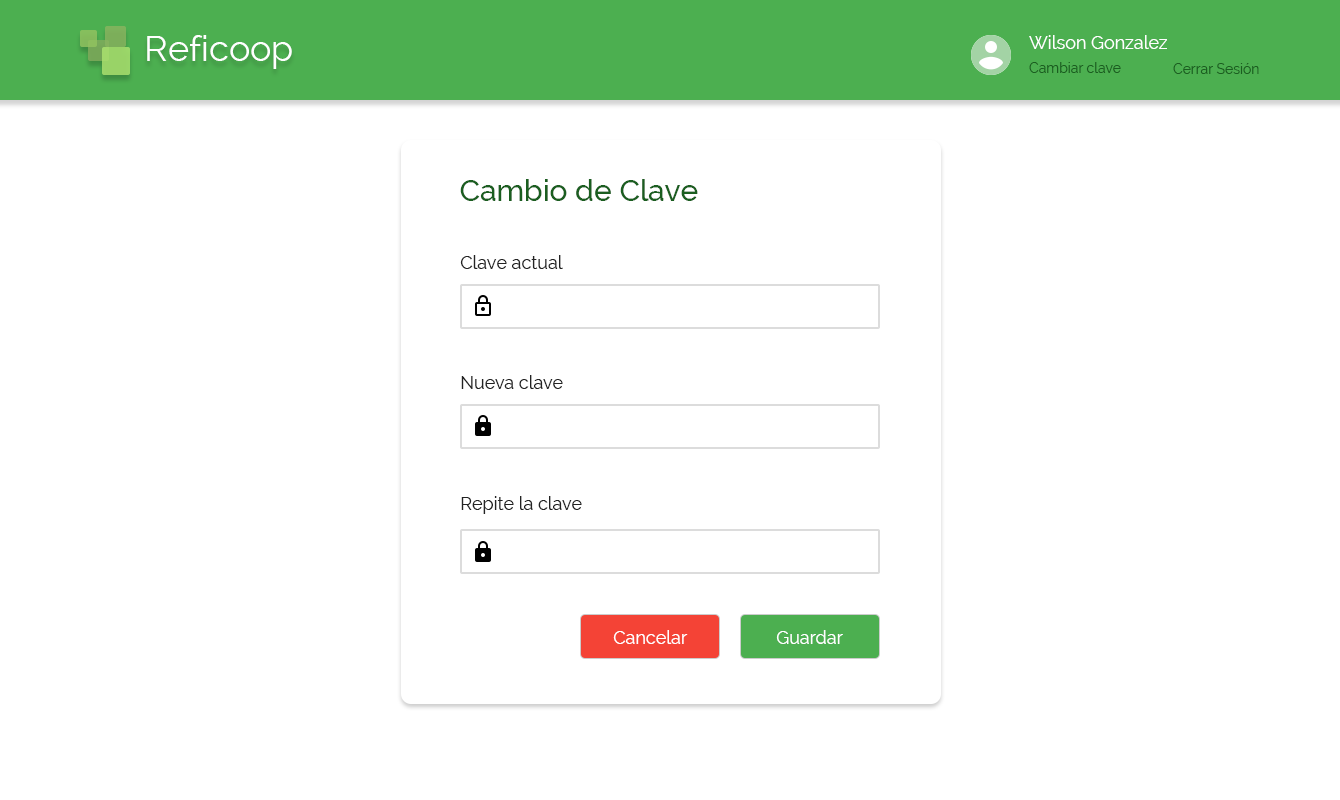
<style>
.page{position:relative;width:1340px;height:800px;background:#ffffff}
.page>*{position:absolute;margin:0}
.t1{font:36px "Raleway";color:#ffffff}
.t2{font:18px "Raleway";color:#ffffff}
.t3{font:14px "Raleway";color:#1b5e20}
.t4{font:30px "Raleway-Medium";color:#1b5e20}
.t5{font:18px "Raleway";color:#232323}
</style>
<div class="page">
<p class="t1" style="left:147px;top:35px;width:145px;height:34px">Reficoop</p>
<p class="t2" style="left:1029px;top:35px;width:138px;height:14px">Wilson Gonzalez</p>
<p class="t3" style="left:1029px;top:62px;width:92px;height:11px">Cambiar clave</p>
<p class="t3" style="left:1173px;top:63px;width:86px;height:11px">Cerrar Sesión</p>
<p class="t4" style="left:460px;top:179px;width:238px;height:22px">Cambio de Clave</p>
<p class="t5" style="left:460px;top:255px;width:103px;height:14px">Clave actual</p>
<p class="t5" style="left:461px;top:375px;width:102px;height:14px">Nueva clave</p>
<p class="t5" style="left:461px;top:496px;width:121px;height:18px">Repite la clave</p>
<p class="t2" style="left:613px;top:630px;width:75px;height:14px">Cancelar</p>
<p class="t2" style="left:776px;top:630px;width:67px;height:14px">Guardar</p>
</div>
